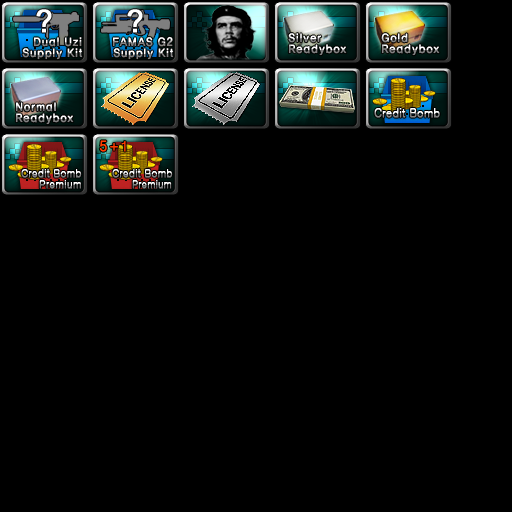
<style>
.page{position:relative;width:512px;height:512px;background:#000000}
.page>*{position:absolute;margin:0}
.t1{font:31.2px "ArialUnicodeMS";color:#ffffff;font-weight:bold}
.t2{font:12px "YDIYGO240";font-weight:bold;scale:0.91 1}
.t3{font:12px/11px "YDIYGO240";font-weight:bold;scale:0.91 1}
.t4{font:12px "Gulim";letter-spacing:-0.01em;font-weight:bold;scale:0.91 1}
.t5{font:14px "Dotum";letter-spacing:-0.1em;color:#ff3c00;font-weight:bold}
.t6{font:11px "Gulim";letter-spacing:-0.01em;font-weight:bold;scale:0.91 1}
.t7{font:11px "Gulim";color:#ffffff;font-weight:bold;scale:0.91 1}
.t8{font:11px "Gulim";font-weight:bold;scale:0.85 1}
</style>
<div class="page">
<p class="t1" style="left:36px;top:9px;width:16px;height:24px">?</p>
<p class="t1" style="left:127px;top:9px;width:16px;height:24px">?</p>
<p class="t2" style="left:33px;top:37px;width:49px;height:10px">Dual Uzi</p>
<p class="t2" style="left:112px;top:36px;width:61px;height:11px">FAMAS G2</p>
<p class="t3" style="left:288px;top:33px;width:59px;height:23px">Silver <br>Readybox</p>
<p class="t3" style="left:381px;top:33px;width:59px;height:23px">Gold <br>Readybox</p>
<p class="t2" style="left:22px;top:48px;width:61px;height:12px">Supply Kit</p>
<p class="t2" style="left:113px;top:48px;width:61px;height:12px">Supply Kit</p>
<p class="t3" style="left:15px;top:102px;width:59px;height:23px">Normal<br>Readybox</p>
<p class="t4" style="left:374px;top:108px;width:66px;height:10px">Credit Bomb</p>
<p class="t5" style="left:99px;top:140px;width:27px;height:12px">5 + 1</p>
<p class="t6" style="left:21px;top:169px;width:61px;height:9px">Credit Bomb</p>
<p class="t6" style="left:112px;top:169px;width:61px;height:9px">Credit Bomb</p>
<p class="t7" style="left:39px;top:180px;width:42px;height:9px">Premium</p>
<p class="t8" style="left:132px;top:180px;width:40px;height:9px">Premium</p>
</div>
